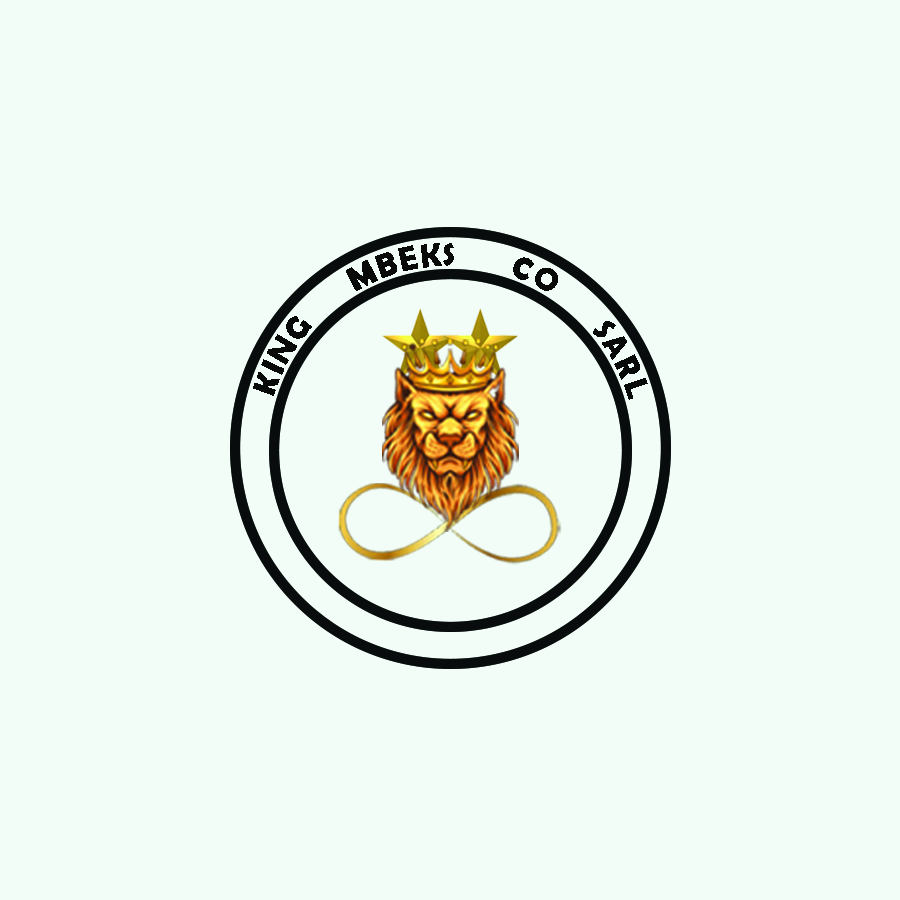
<style>
.page{position:relative;width:900px;height:900px;background:#f1fdf6}
.page>*{position:absolute;margin:0}
.t1{font:33.3px "BerlinSansFBDemi-Bold";color:#090b0b}
</style>
<div class="page">
<p class="t1" style="left:253px;top:243px;width:395px;height:157px;text-align:center">KING      MBEKS      CO      SARL</p>
</div>
